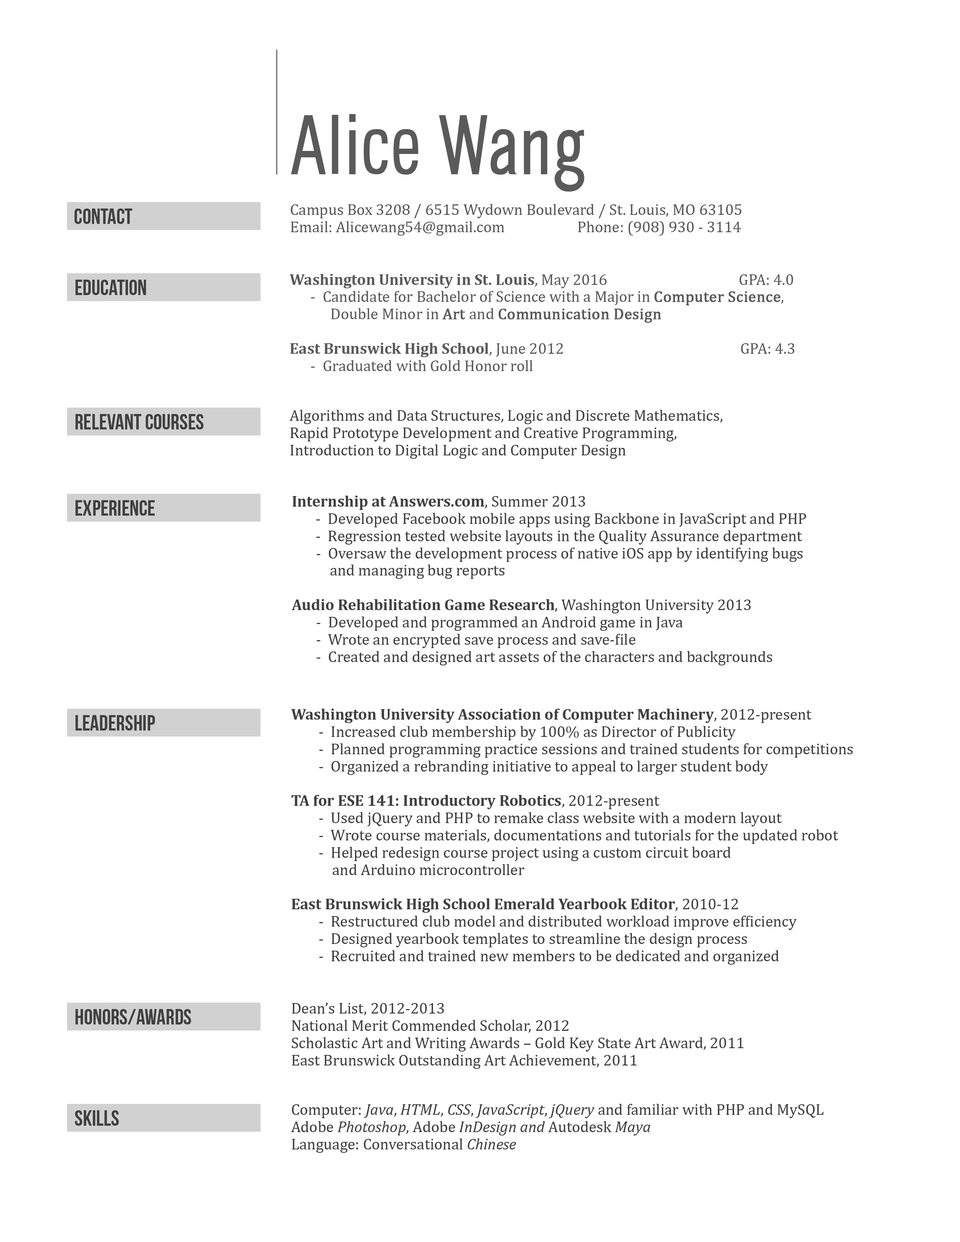
<style>
.page{position:relative;width:960px;height:1242px;background:#ffffff}
.page>*{position:absolute;margin:0}
.t1{font:22px "BebasNeue";color:#3f3f3f}
.t2{font:15.7px/17.3px "Cambria";color:#585858}
.t3{font:15.7px/17.3px "Cambria";color:#595959}
.t4{font:15.7px/17.3px "Cambria-Bold";color:#595959}
.t5{font:15.7px/17.3px "Cambria";color:#595959;font-weight:bold}
.t6{font:15.7px/17.3px "Cambria";color:#3f3f3f}
.t7{font:15.7px/17.3px "Cambria-Bold";color:#3f3f3f}
.t8{font:15.7px/17.3px "Cambria-Italic";color:#3f3f3f}
</style>
<div class="page">
<p class="t1" style="left:75px;top:209px;width:58px;height:15px">Contact</p>
<p class="t2" style="left:291px;top:204px;width:451px;height:32px">Campus Box 3208 / 6515 Wydown Boulevard / St. Louis, MO 63105<br>Email: Alicewang54@gmail.com                     Phone: (908) 930 - 3114</p>
<p class="t1" style="left:75px;top:280px;width:71px;height:15px">Education</p>
<p class="t3" style="left:289px;top:274px;width:505px;height:97px"><span class="t4">Washington University in St. Louis</span>, May 2016                                      GPA: 4.0<br>      -  Candidate for Bachelor of Science with a Major in <span class="t5">Computer Science</span>, <br>   Double Minor in <span class="t5">Art </span>and <span class="t5">Communication Design<br>               <br></span><span class="t4">East Brunswick High School</span>, June 2012                                                   GPA: 4.3<br>      -  Graduated with Gold Honor roll</p>
<p class="t6" style="left:289px;top:410px;width:433px;height:49px">Algorithms and Data Structures, Logic and Discrete Mathematics,<br>Rapid Prototype Development and Creative Programming, <br>Introduction to Digital Logic and Computer Design</p>
<p class="t1" style="left:75px;top:414px;width:129px;height:16px">Relevant Courses</p>
<p class="t6" style="left:291px;top:496px;width:515px;height:170px"><span class="t7">Internship at Answers.com</span>, Summer 2013<br>    -  Developed Facebook mobile apps using Backbone in JavaScript and PHP<br>    -  Regression tested website layouts in the Quality Assurance department<br>       -  Oversaw the development process of native iOS app by identifying bugs <br>           and managing bug reports<br>      <br><span class="t7">Audio Rehabilitation Game Research</span>, Washington University 2013<br>       -  Developed and programmed an Android game in Java<br>       -  Wrote an encrypted save process and save-file<br>       -  Created and designed art assets of the characters and backgrounds</p>
<p class="t1" style="left:75px;top:500px;width:80px;height:16px">Experience</p>
<p class="t6" style="left:291px;top:709px;width:562px;height:256px"><span class="t7">Washington University Association of Computer Machinery</span>, 2012-present<br>        -  Increased club membership by 100% as Director of Publicity<br>        -  Planned programming practice sessions and trained students for competitions<br>        -  Organized a rebranding initiative to appeal to larger student body<br>      <br><span class="t7">TA for ESE 141: Introductory Robotics</span>, 2012-present<br>        -  Used jQuery and PHP to remake class website with a modern layout<br>        -  Wrote course materials, documentations and tutorials for the updated robot<br>        -  Helped redesign course project using a custom circuit board <br>         and Arduino microcontroller<br>                 <br><span class="t7">East Brunswick High School Emerald Yearbook Editor</span>, 2010-12<br>        -  Restructured club model and distributed workload improve efficiency<br>        -  Designed yearbook templates to streamline the design process  <br>        -  Recruited and trained new members to be dedicated and organized</p>
<p class="t1" style="left:75px;top:715px;width:80px;height:16px">Leadership</p>
<p class="t1" style="left:75px;top:1009px;width:116px;height:16px">Honors/Awards</p>
<p class="t6" style="left:292px;top:1003px;width:451px;height:66px">Dean’s List, 2012-2013<br>National Merit Commended Scholar, 2012<br>Scholastic Art and Writing Awards – Gold Key State Art Award, 2011<br>East Brunswick Outstanding Art Achievement, 2011</p>
<p class="t6" style="left:291px;top:1104px;width:533px;height:49px">Computer: <span class="t8">Java</span>, <span class="t8">HTML</span>, <span class="t8">CSS</span>, <span class="t8">JavaScript</span>, <span class="t8">jQuery</span> and familiar with PHP and MySQL<br>Adobe <span class="t8">Photoshop</span>, Adobe <span class="t8">InDesign and </span>Autodesk <span class="t8">Maya</span><br>Language: Conversational <span class="t8">Chinese</span></p>
<p class="t1" style="left:75px;top:1110px;width:44px;height:16px">Skills</p>
</div>
